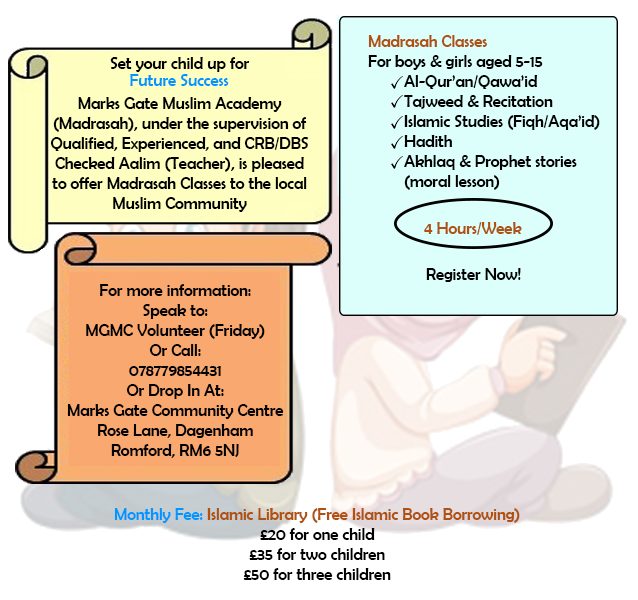
<style>
.page{position:relative;width:638px;height:600px;background:#ffffff}
.page>*{position:absolute;margin:0}
.t1{font:12px "BerlinSansFB-Reg";color:#000000}
.t2{font:12px "BerlinSansFB-Reg";color:#b0510f}
.t3{font:12px "BerlinSansFB-Reg";color:#0096ff}
</style>
<div class="page">
<p class="t1" style="left:368px;top:35px;width:232px;height:155px;text-align:right"><span class="t2">Madrasah Classes<br></span>For boys &amp; girls aged 5-15<br> Al-Qur’an/Qawa’id<br> Tajweed &amp; Recitation<br> Islamic Studies (Fiqh/Aqa’id)<br> Hadith<br> Akhlaq &amp; Prophet stories    (moral lesson)</p>
<p class="t1" style="left:50px;top:57px;width:259px;height:155px;text-align:center">Set your child up for<br><br>Marks Gate Muslim Academy (Madrasah), under the supervision of Qualified, Experienced, and CRB/DBS Checked Aalim (Teacher), is pleased to offer Madrasah Classes to the local Muslim Community</p>
<p class="t3" style="left:130px;top:74px;width:99px;height:12px">Future Success</p>
<p class="t2" style="left:424px;top:222px;width:98px;height:13px">4 Hours/Week</p>
<p class="t1" style="left:426px;top:268px;width:95px;height:14px">Register Now!</p>
<p class="t1" style="left:67px;top:284px;width:217px;height:174px;text-align:center">For more information:<br>Speak to: <br>MGMC Volunteer (Friday)<br>Or Call:<br>078779854431<br>Or Drop In At:<br>Marks Gate Community Centre<br>Rose Lane, Dagenham<br>Romford, RM6 5NJ</p>
<p class="t1" style="left:114px;top:508px;width:406px;height:72px;text-align:center"><span class="t3">Monthly Fee: </span><span class="t2">Islamic Library (Free Islamic Book Borrowing)<br></span>£20 for one child<br>£35 for two children<br>£50 for three children</p>
</div>
